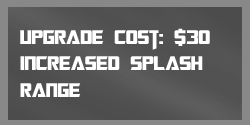
<style>
.page{position:relative;width:250px;height:125px}
.page>*{position:absolute;margin:0}
.t1{font:22px "TransformersMovie";color:#ffffff}
</style>
<div class="page">
<p class="t1" style="left:20px;top:28px;width:190px;height:69px">upgrade cost: $30<br>Increased Splash<br>Range</p>
</div>
